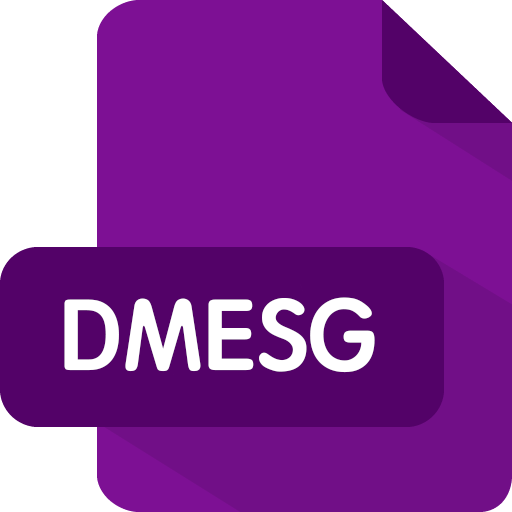
<style>
.page{position:relative;width:512px;height:512px;background:#7d1094}
.page>*{position:absolute;margin:0}
.t1{font:100.8px "STYuanti-SC-Bold";color:#ffffff}
</style>
<div class="page">
<p class="t1" style="left:64px;top:297px;width:311px;height:76px">DMESG</p>
</div>
